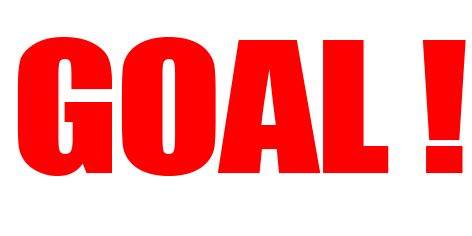
<style>
.page{position:relative;width:472px;height:236px;background:#ffffff}
.page>*{position:absolute;margin:0}
.t1{font:168px "Impact";letter-spacing:-0.02em;color:#ff0000;scale:1.17 1}
</style>
<div class="page">
<p class="t1" style="left:17px;top:37px;width:449px;height:139px">GOAL !</p>
</div>
